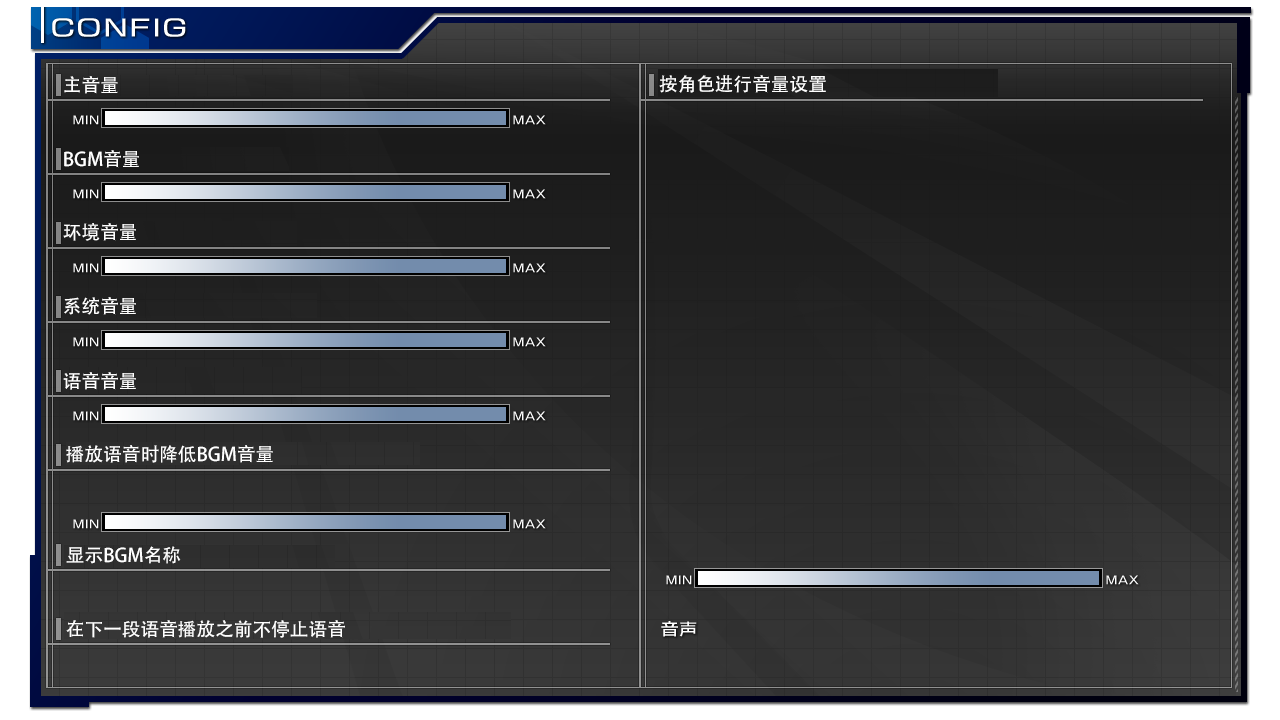
<style>
.page{position:relative;width:1280px;height:720px}
.page>*{position:absolute;margin:0}
.t1{font:18.7px "AdobeHeitiStd-Regular";color:#ffffff}
</style>
<div class="page">
<p class="t1" style="left:64px;top:76px;width:54px;height:18px">主音量</p>
<p class="t1" style="left:659px;top:75px;width:167px;height:18px">按角色进行音量设置</p>
<p class="t1" style="left:64px;top:150px;width:75px;height:18px">BGM音量</p>
<p class="t1" style="left:63px;top:223px;width:73px;height:18px">环境音量</p>
<p class="t1" style="left:64px;top:297px;width:72px;height:18px">系统音量</p>
<p class="t1" style="left:63px;top:372px;width:73px;height:18px">语音音量</p>
<p class="t1" style="left:66px;top:445px;width:207px;height:18px">播放语音时降低BGM音量</p>
<p class="t1" style="left:66px;top:546px;width:115px;height:18px">显示BGM名称</p>
<p class="t1" style="left:66px;top:620px;width:279px;height:18px">在下一段语音播放之前不停止语音</p>
</div>
